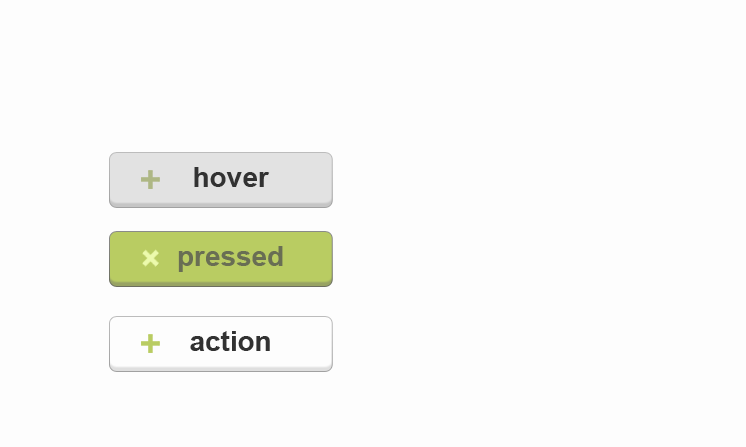
<style>
.page{position:relative;width:746px;height:447px;background:#fdfdfd}
.page>*{position:absolute;margin:0}
.t1{font:28px "Arial-BoldMT";color:#323232}
.t2{font:28px "Arial-BoldMT";color:#696e54}
</style>
<div class="page">
<p class="t1" style="left:194px;top:167px;width:76px;height:20px">hover</p>
<p class="t2" style="left:178px;top:246px;width:105px;height:26px">pressed</p>
<p class="t1" style="left:190px;top:331px;width:80px;height:20px">action</p>
</div>
